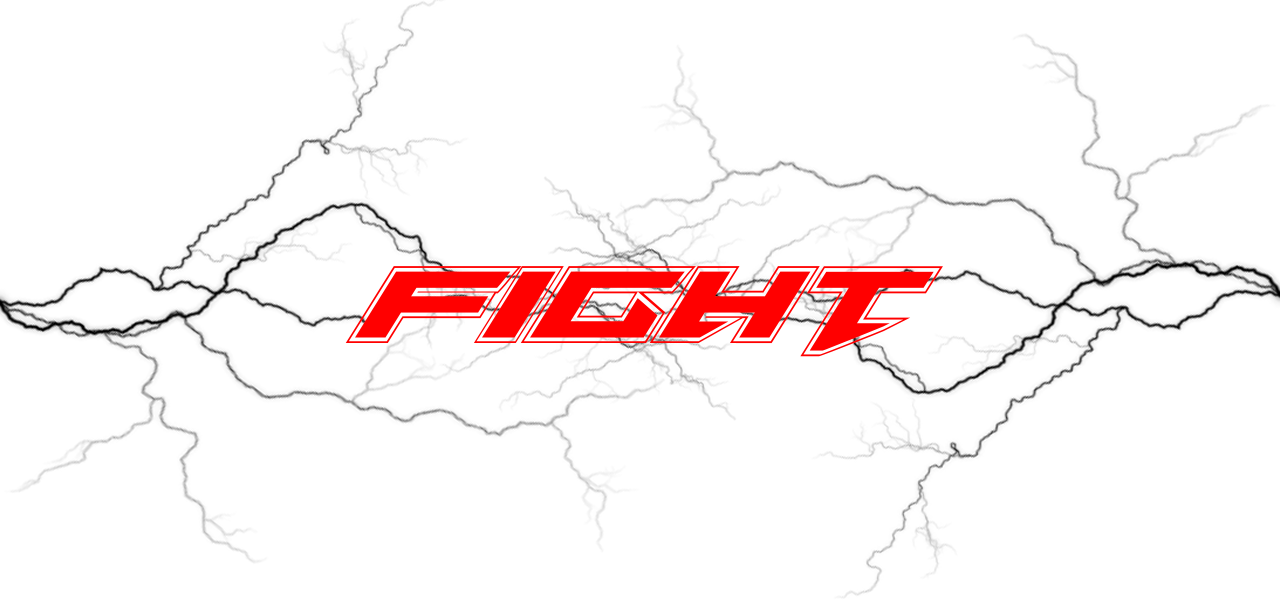
<style>
.page{position:relative;width:1280px;height:600px;background:#ffffff}
.page>*{position:absolute;margin:0}
.t1{font:145.1px "TarrgetAcademyItalic";color:#ff0000}
</style>
<div class="page">
<p class="t1" style="left:345px;top:266px;width:598px;height:91px">fight</p>
</div>
